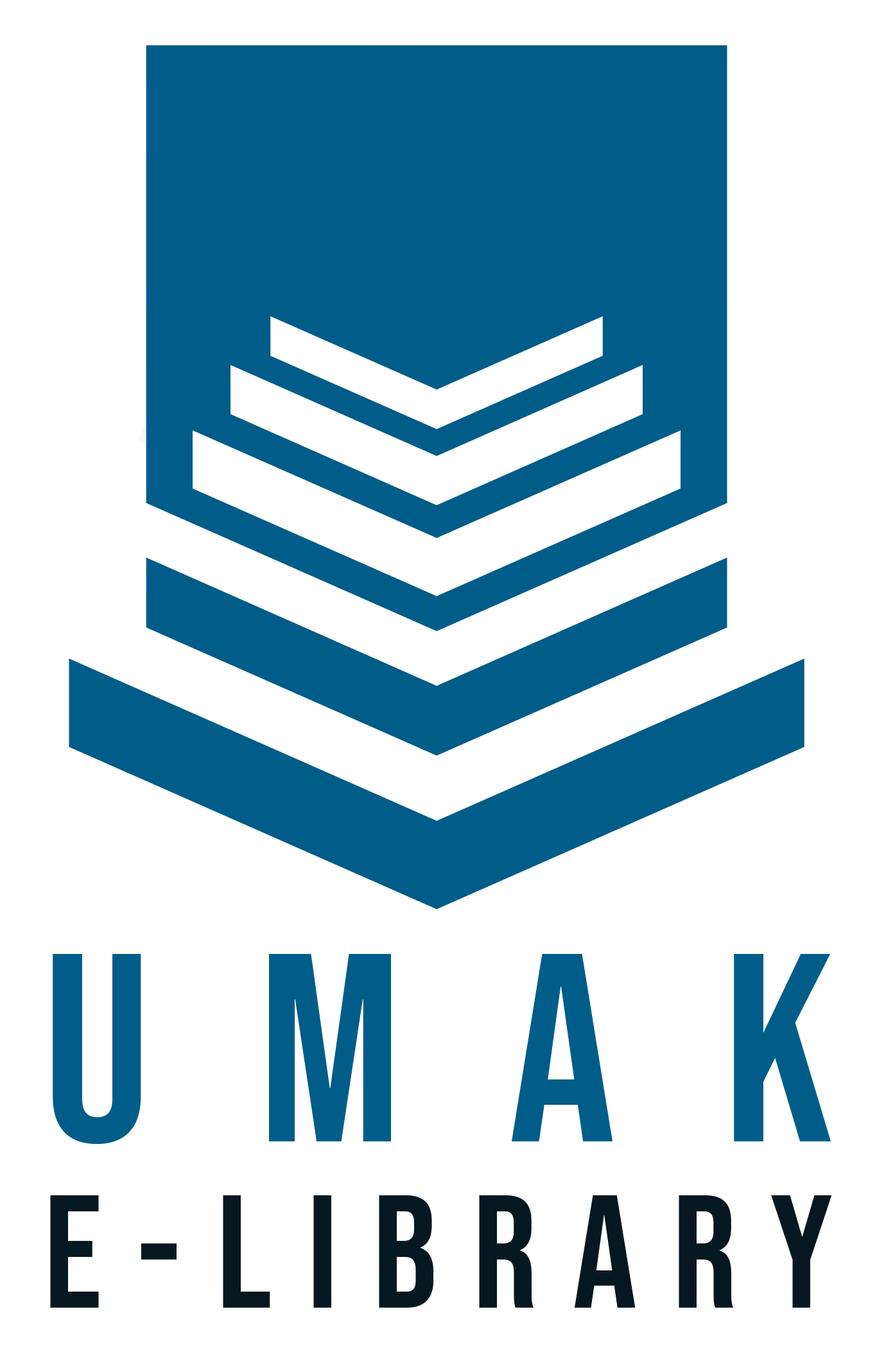
<style>
.page{position:relative;width:877px;height:1359px;background:#ffffff}
.page>*{position:absolute;margin:0}
.t1{font:267.6px "BebasNeue-Regular";letter-spacing:0.4em;color:#005d89}
.t2{font:160.5px "BebasNeue-Regular";letter-spacing:0.22em;color:#051821}
</style>
<div class="page">
<p class="t1" style="left:53px;top:954px;width:778px;height:191px">UMAK</p>
<p class="t2" style="left:50px;top:1196px;width:782px;height:112px">E-LIBRARY</p>
</div>
